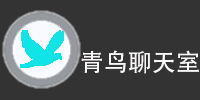
<style>
.page{position:relative;width:200px;height:100px;background:#333333}
.page>*{position:absolute;margin:0}
.t1{font:24px "AdobeHeitiStd-Regular";color:#f9f6f6}
</style>
<div class="page">
<p class="t1" style="left:81px;top:50px;width:118px;height:24px">青鸟聊天室</p>
</div>
